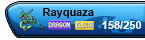
<style>
.page{position:relative;width:145px;height:40px}
.page>*{position:absolute;margin:0}
.t1{font:11px "Arial-BoldMT";color:#000000}
.t2{font:11px "Arial-BoldMT";color:#ffffff}
</style>
<div class="page">
<p class="t1" style="left:43px;top:8px;width:51px;height:10px">Rayquaza</p>
<p class="t2" style="left:102px;top:21px;width:40px;height:8px">158/250</p>
</div>
